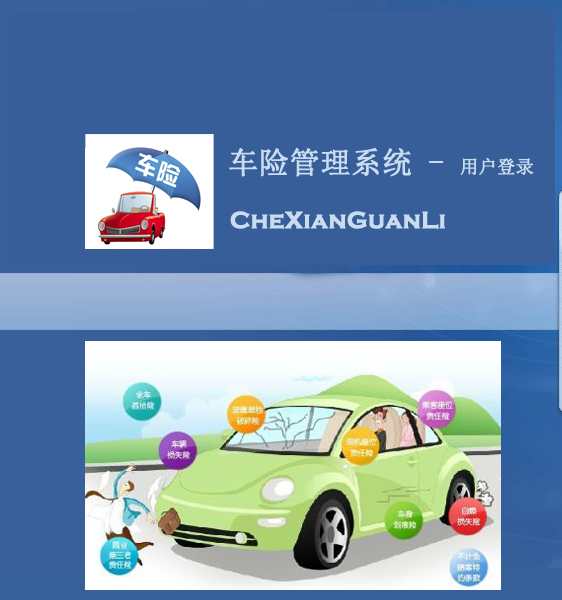
<style>
.page{position:relative;width:562px;height:600px;background:#375e99}
.page>*{position:absolute;margin:0}
.t1{font:30px "SimSun";color:#cadcf0;font-weight:bold}
.t2{font:18px "SimSun";color:#cadcf0;font-weight:bold}
.t3{font:24px "CopperplateGothic-Bold";color:#cadcf0;font-weight:bold}
</style>
<div class="page">
<p class="t1" style="left:229px;top:147px;width:305px;height:30px">车险管理系统 - <span class="t2">用户登录</span></p>
<p class="t3" style="left:230px;top:211px;width:215px;height:19px">CheXianGuanLi</p>
</div>
